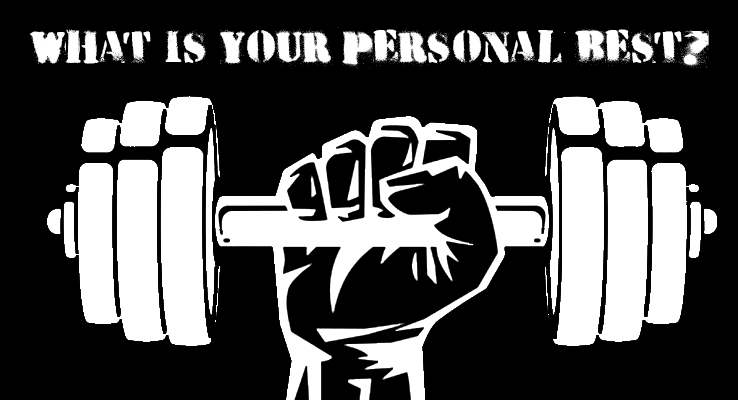
<style>
.page{position:relative;width:738px;height:400px;background:#000000}
.page>*{position:absolute;margin:0}
.t1{font:42px "HVDPeace";color:#ffffff}
</style>
<div class="page">
<p class="t1" style="left:30px;top:27px;width:679px;height:42px">WHAT IS YOUR PERSONAL BEST?</p>
</div>
